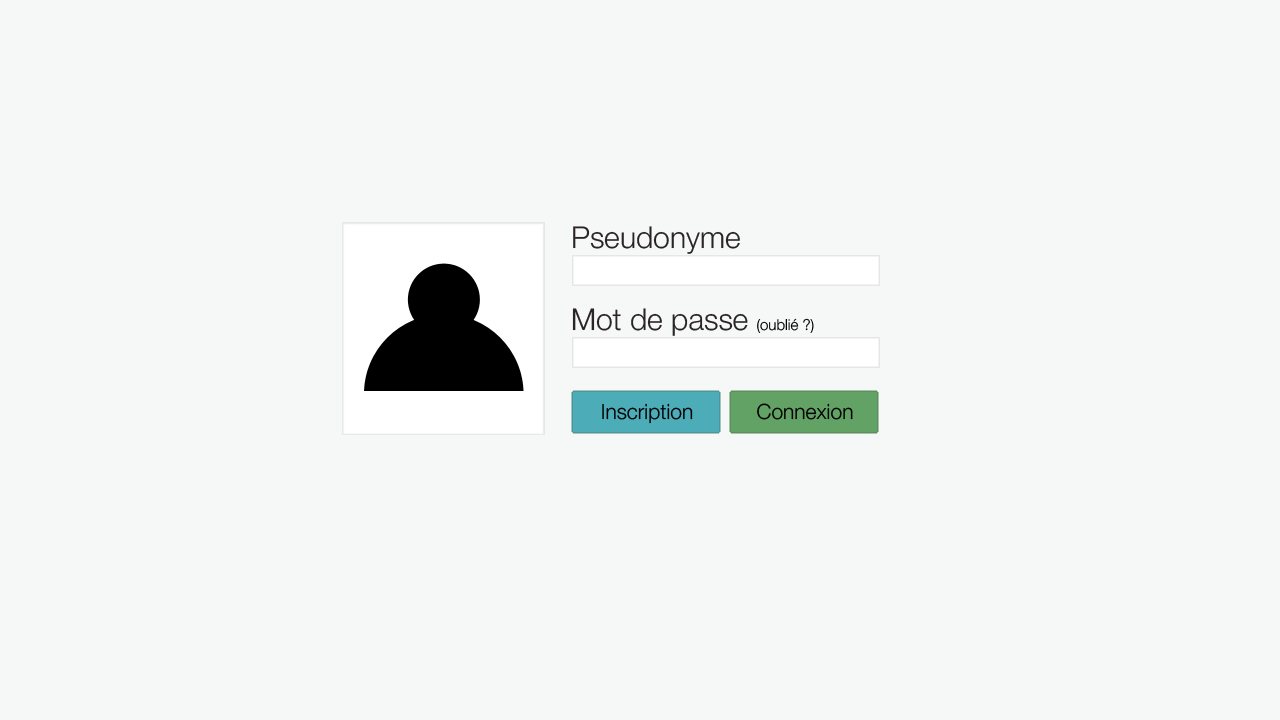
<style>
.page{position:relative;width:1280px;height:720px;background:#f6f7f7}
.page>*{position:absolute;margin:0}
.t1{font:30px "HelveticaNeueLight";color:#2a2424}
.t2{font:15px "HelveticaNeueLight";color:#000000}
.t3{font:21px "HelveticaNeueLight";color:#000000}
</style>
<div class="page">
<p class="t1" style="left:573px;top:226px;width:167px;height:28px">Pseudonyme</p>
<p class="t1" style="left:572px;top:308px;width:176px;height:28px">Mot de passe</p>
<p class="t2" style="left:757px;top:318px;width:57px;height:15px">(oublié ?)</p>
<p class="t3" style="left:602px;top:403px;width:91px;height:21px">Inscription</p>
<p class="t3" style="left:757px;top:403px;width:96px;height:17px">Connexion</p>
</div>
